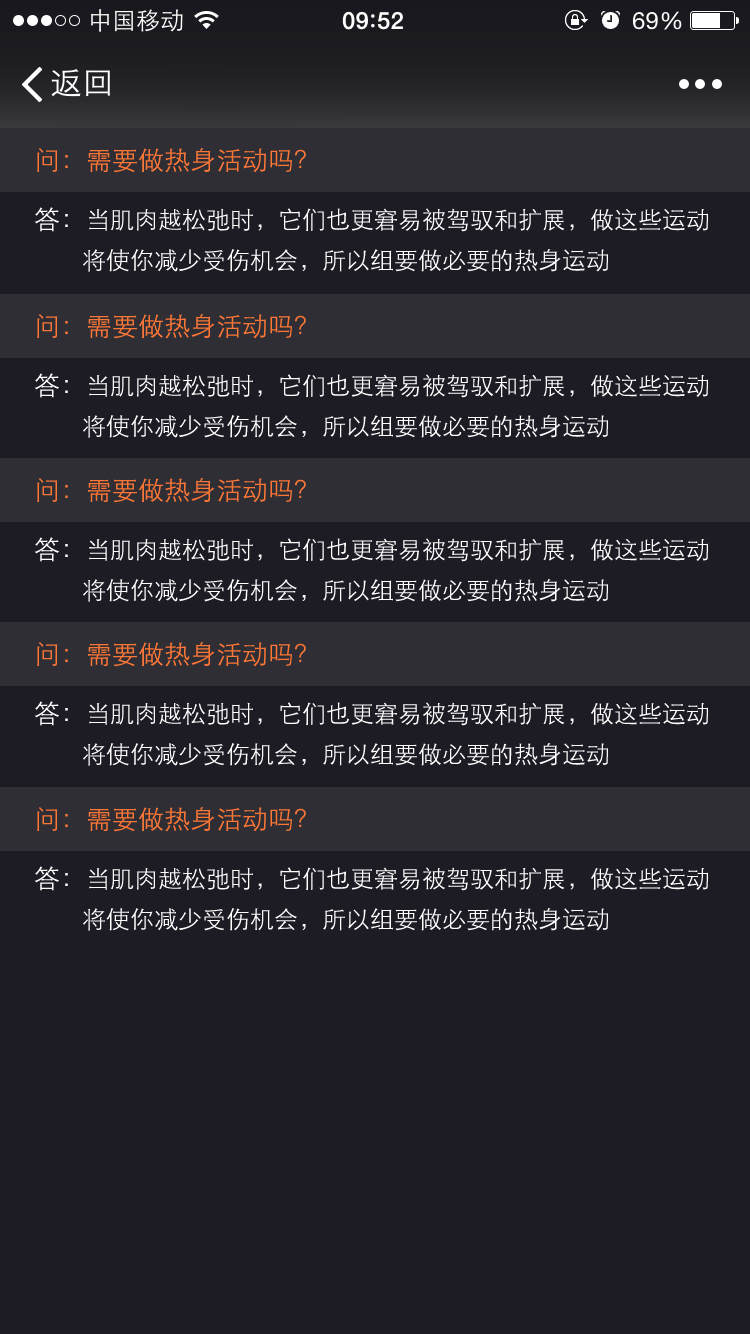
<style>
.page{position:relative;width:750px;height:1334px;background:#1d1c24}
.page>*{position:absolute;margin:0}
.t1{font:26px "STXihei";color:#ff7736}
.t2{font:24px "STXihei";color:#ffffff}
.t3{font:26px/42px "STXihei";color:#ffffff}
</style>
<div class="page">
<p class="t1" style="left:37px;top:148px;width:269px;height:25px">问：需要做热身活动吗？</p>
<p class="t2" style="left:34px;top:207px;width:674px;height:65px"><span class="t3">答：</span>当肌肉越松弛时，它们也更窘易被驾驭和扩展，做这些运动<br>   将使你减少受伤机会，所以组要做必要的热身运动</p>
<p class="t1" style="left:37px;top:314px;width:269px;height:25px">问：需要做热身活动吗？</p>
<p class="t2" style="left:34px;top:373px;width:674px;height:65px"><span class="t3">答：</span>当肌肉越松弛时，它们也更窘易被驾驭和扩展，做这些运动<br>   将使你减少受伤机会，所以组要做必要的热身运动</p>
<p class="t1" style="left:37px;top:478px;width:269px;height:25px">问：需要做热身活动吗？</p>
<p class="t2" style="left:34px;top:537px;width:674px;height:65px"><span class="t3">答：</span>当肌肉越松弛时，它们也更窘易被驾驭和扩展，做这些运动<br>   将使你减少受伤机会，所以组要做必要的热身运动</p>
<p class="t1" style="left:37px;top:642px;width:269px;height:25px">问：需要做热身活动吗？</p>
<p class="t2" style="left:34px;top:701px;width:674px;height:65px"><span class="t3">答：</span>当肌肉越松弛时，它们也更窘易被驾驭和扩展，做这些运动<br>   将使你减少受伤机会，所以组要做必要的热身运动</p>
<p class="t1" style="left:37px;top:807px;width:269px;height:25px">问：需要做热身活动吗？</p>
<p class="t2" style="left:34px;top:866px;width:674px;height:65px"><span class="t3">答：</span>当肌肉越松弛时，它们也更窘易被驾驭和扩展，做这些运动<br>   将使你减少受伤机会，所以组要做必要的热身运动</p>
</div>
